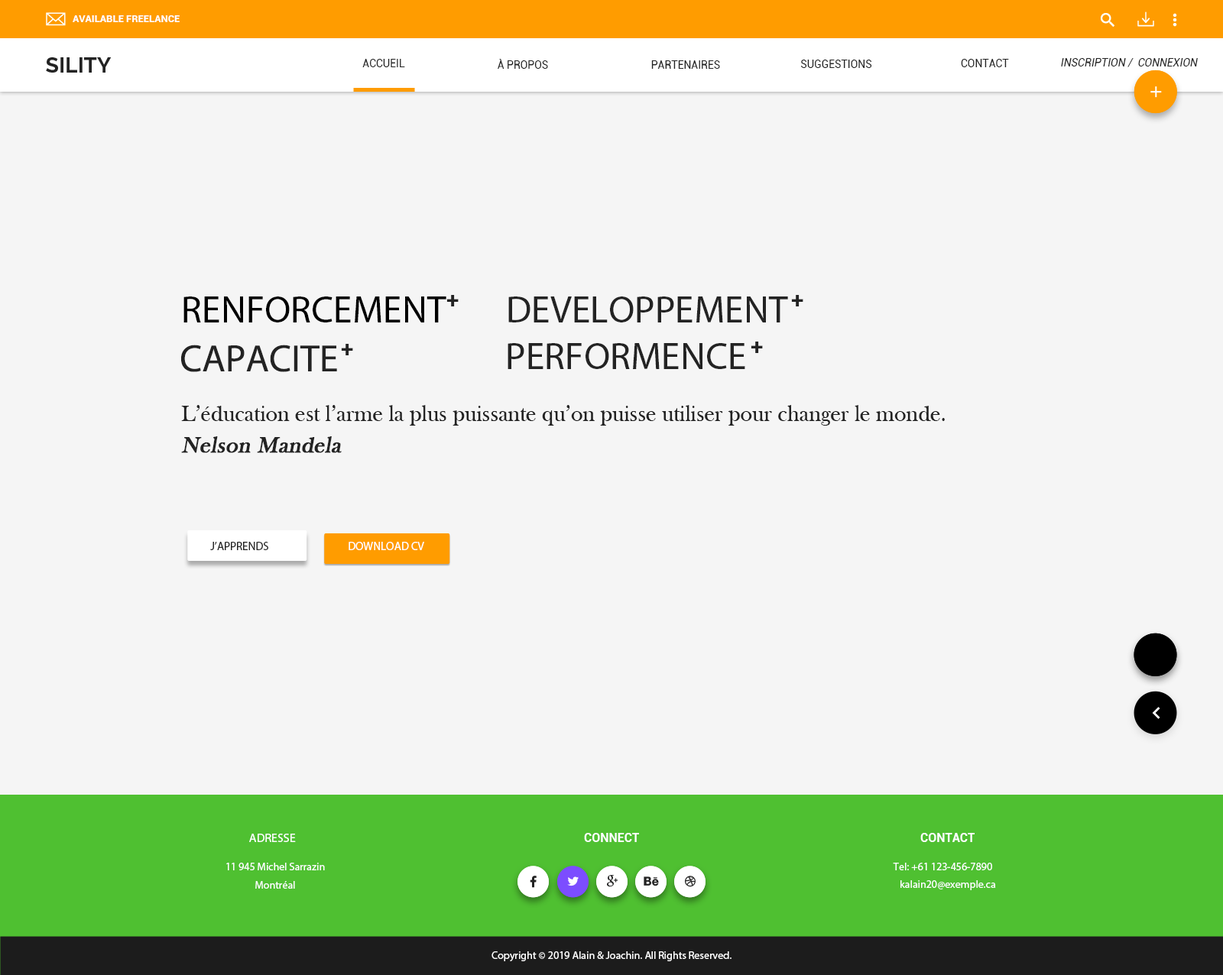
<style>
.page{position:relative;width:1223px;height:975px;background:#f5f5f5}
.page>*{position:absolute;margin:0}
.t1{font:9.9px "Roboto-Bold";color:#ffffff;text-transform:uppercase}
.t2{font:21.4px "Raleway-Bold";color:#232323}
.t3{font:10.7px "Roboto-Regular";color:#232323;text-transform:uppercase}
.t4{font:10.7px "Roboto-Regular";color:#232323;text-transform:uppercase;font-style:italic}
.t5{font:38.2px "MyriadPro-Regular";color:#000000;text-transform:uppercase}
.t6{font:22.9px "Roboto-Bold";color:#232323;text-transform:uppercase}
.t7{font:38.2px "MyriadPro-Regular";color:#232323;text-transform:uppercase}
.t8{font:22.9px "BaskOldFace";color:#232323}
.t9{font:22.9px "BaskOldFace";color:#232323;font-weight:bold;font-style:italic}
.t10{font:11.5px "MyriadPro-Regular";color:#232323}
.t11{font:11.5px "MyriadPro-Regular";color:#ffffff}
.t12{font:12.2px "MyriadPro-Regular";color:#ffffff;text-transform:uppercase}
.t13{font:12.2px "Roboto-Bold";color:#ffffff;text-transform:uppercase}
.t14{font:10.7px/18.3px "MyriadPro-Regular";color:#ffffff}
.t15{font:10.7px "MyriadPro-Regular";color:#ffffff}
</style>
<div class="page">
<p class="t1" style="left:73px;top:15px;width:107px;height:7px">available freelance</p>
<p class="t2" style="left:46px;top:57px;width:66px;height:16px">SILITY</p>
<p class="t3" style="left:362px;top:59px;width:43px;height:8px">Accueil</p>
<p class="t3" style="left:498px;top:59px;width:50px;height:10px">À PROPOS</p>
<p class="t3" style="left:651px;top:60px;width:69px;height:9px">Partenaires</p>
<p class="t3" style="left:801px;top:60px;width:71px;height:8px">Suggestions</p>
<p class="t3" style="left:961px;top:59px;width:48px;height:8px">Contact</p>
<p class="t4" style="left:1061px;top:58px;width:137px;height:9px">INSCRIPTION /  CONNEXION</p>
<p class="t5" style="left:183px;top:297px;width:263px;height:26px">RENFORCEMENT</p>
<p class="t6" style="left:446px;top:295px;width:13px;height:11px">+</p>
<p class="t7" style="left:508px;top:297px;width:280px;height:26px">developPEMENT</p>
<p class="t6" style="left:791px;top:295px;width:12px;height:11px">+</p>
<p class="t6" style="left:750px;top:342px;width:13px;height:11px">+</p>
<p class="t7" style="left:181px;top:345px;width:156px;height:27px">CAPACITE</p>
<p class="t6" style="left:341px;top:344px;width:12px;height:11px">+</p>
<p class="t7" style="left:507px;top:343px;width:238px;height:26px">PERFORMENCE</p>
<p class="t8" style="left:181px;top:405px;width:764px;height:21px">L’éducation est l’arme la plus puissante qu’on puisse utiliser pour changer le monde.</p>
<p class="t9" style="left:181px;top:436px;width:161px;height:17px">Nelson Mandela</p>
<p class="t10" style="left:210px;top:542px;width:58px;height:8px">J’APPRENDS</p>
<p class="t11" style="left:348px;top:542px;width:76px;height:8px">DOWNLOAD CV</p>
<p class="t12" style="left:249px;top:834px;width:47px;height:8px">ADRESSE</p>
<p class="t13" style="left:584px;top:833px;width:55px;height:9px">connect</p>
<p class="t13" style="left:920px;top:833px;width:54px;height:9px">contact</p>
<p class="t14" style="left:226px;top:863px;width:99px;height:26px;text-align:center">11 945 Michel Sarrazin<br>Montréal</p>
<p class="t15" style="left:893px;top:863px;width:99px;height:7px">Tel: +61 123-456-7890</p>
<p class="t15" style="left:900px;top:880px;width:96px;height:10px">kalain20@exemple.ca</p>
<p class="t15" style="left:491px;top:951px;width:240px;height:10px">Copyright © 2019 Alain &amp; Joachin. All Rights Reserved.</p>
</div>
